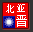
<style>
.page{position:relative;width:33px;height:32px;background:#f20000}
.page>*{position:absolute;margin:0}
.t1{font:10.4px "SimSun";color:#ffffff}
.t2{font:11.7px "SimSun";color:#ffffff}
</style>
<div class="page">
<p class="t1" style="left:6px;top:4px;width:19px;height:9px">北亚</p>
<p class="t2" style="left:16px;top:15px;width:11px;height:12px">晋</p>
</div>
